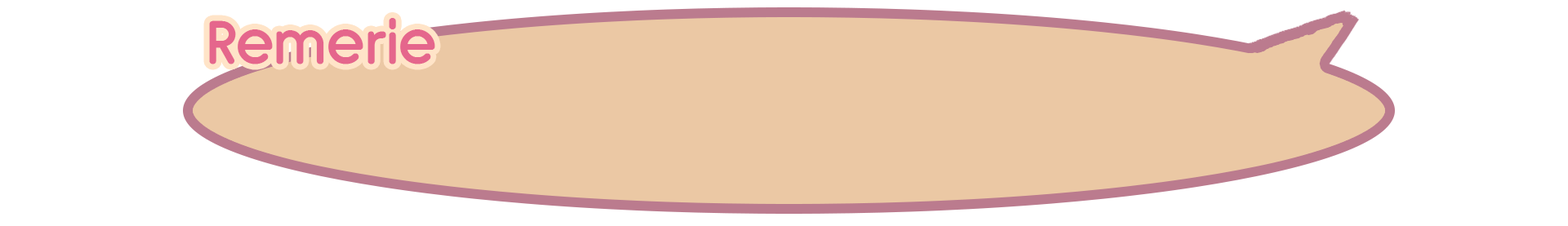
<style>
.page{position:relative;width:1568px;height:226px;background:#ebc8a4}
.page>*{position:absolute;margin:0}
.t1{font:58.8px "RimouskiSb-Regular";color:#e5668c}
</style>
<div class="page">
<p class="t1" style="left:209px;top:18px;width:226px;height:47px">Remerie</p>
</div>
